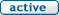
<style>
.page{position:relative;width:59px;height:15px;background:#ffffff}
.page>*{position:absolute;margin:0}
.t1{font:10.8px "TrebuchetMS";letter-spacing:0.025em;color:#006394;font-weight:bold;scale:1.11 1}
</style>
<div class="page">
<p class="t1" style="left:10px;top:3px;width:36px;height:9px">active</p>
</div>
